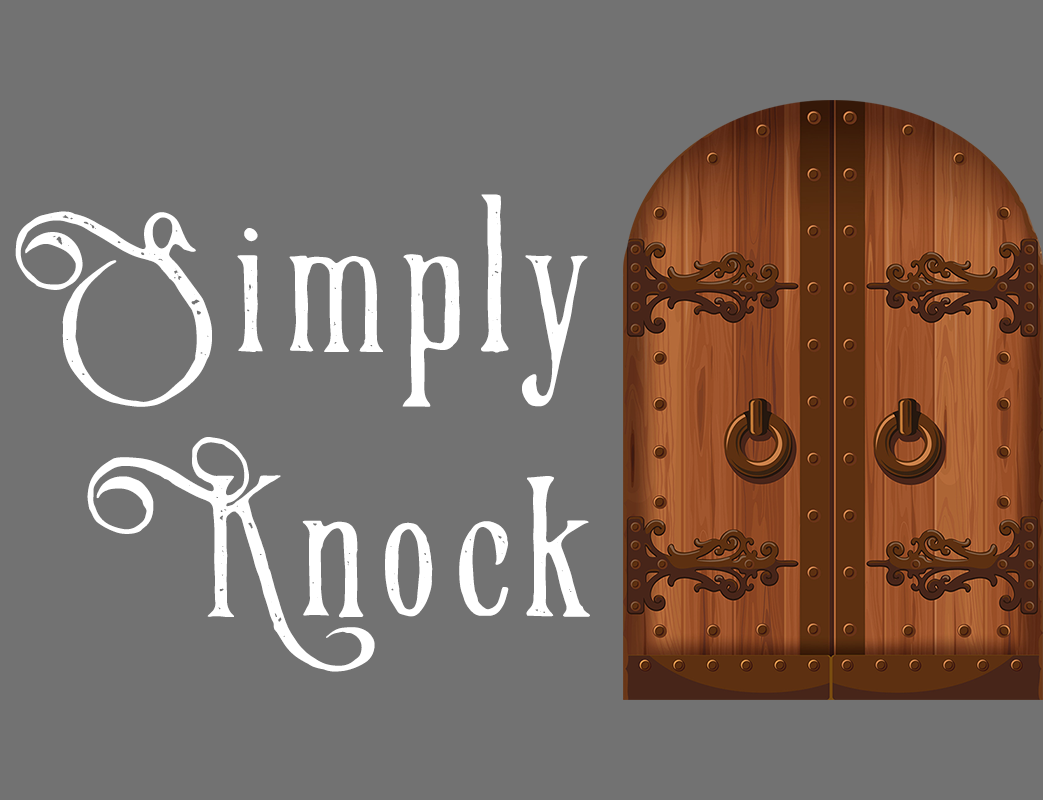
<style>
.page{position:relative;width:1043px;height:800px;background:#727272}
.page>*{position:absolute;margin:0}
.t1{font:220.8px "VictorianParlorVintageAlternatefree";letter-spacing:0.08em;color:#ffffff}
</style>
<div class="page">
<p class="t1" style="left:15px;top:194px;width:575px;height:478px;text-align:right">Simply<br>Knock</p>
</div>
